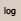
<style>
.page{position:relative;width:21px;height:21px;background:#d9cdc1}
.page>*{position:absolute;margin:0}
.t1{font:9px "Tahoma";color:#000000}
</style>
<div class="page">
<p class="t1" style="left:4px;top:7px;width:12px;height:9px">log</p>
</div>
